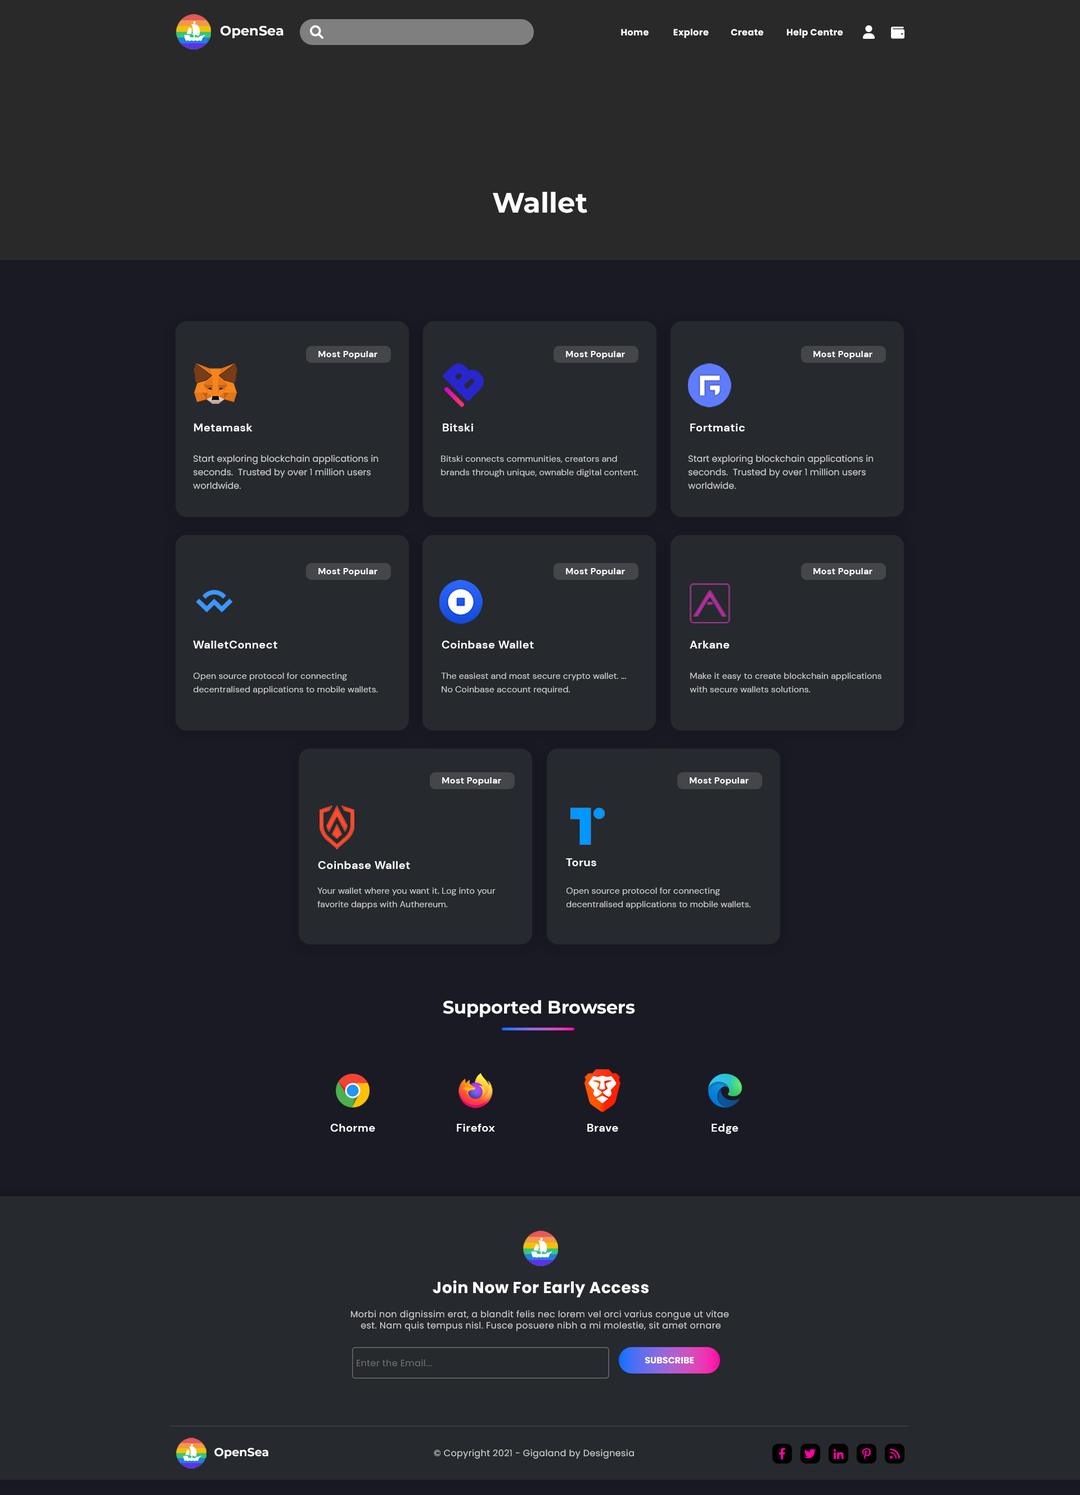
<style>
.page{position:relative;width:1080px;height:1495px;background:#26292d}
.page>*{position:absolute;margin:0}
.t1{font:13.5px "Montserrat-Bold";color:#ffffff}
.t2{font:9px "Poppins-Bold";letter-spacing:0.025em;color:#ffffff}
.t3{font:28.1px "Montserrat-Bold";color:#fefefe}
.t4{font:9px "DMSans-Bold";letter-spacing:0.025em;color:#ffffff}
.t5{font:11.2px "DMSans-Bold";letter-spacing:0.025em;color:#ffffff}
.t6{font:9px/13.5px "Poppins-Regular";color:#cccccc}
.t7{font:9px/13.5px "DMSans-Regular";color:#cccccc}
.t8{font:18px "Montserrat-Bold";color:#ffffff}
.t9{font:15.8px "Poppins-Bold";letter-spacing:0.025em;color:#ffffff}
.t10{font:9px "Poppins-Regular";letter-spacing:0.025em;color:#cccccc}
.t11{font:9px "Poppins-Regular";letter-spacing:0.025em;color:#6d6d6d}
.t12{font:9px "Poppins-Bold";color:#ffffff}
.t13{font:11.6px "Montserrat-Bold";color:#ffffff}
</style>
<div class="page">
<p class="t1" style="left:220px;top:26px;width:64px;height:12px">OpenSea</p>
<p class="t2" style="left:621px;top:29px;width:28px;height:7px">Home</p>
<p class="t2" style="left:673px;top:29px;width:36px;height:9px">Explore</p>
<p class="t2" style="left:731px;top:29px;width:32px;height:7px">Create</p>
<p class="t2" style="left:787px;top:29px;width:56px;height:9px">Help Centre</p>
<p class="t3" style="left:493px;top:192px;width:94px;height:21px">Wallet</p>
<p class="t4" style="left:318px;top:351px;width:59px;height:8px">Most Popular</p>
<p class="t4" style="left:566px;top:351px;width:59px;height:8px">Most Popular</p>
<p class="t4" style="left:813px;top:351px;width:59px;height:8px">Most Popular</p>
<p class="t5" style="left:194px;top:424px;width:59px;height:7px">Metamask</p>
<p class="t5" style="left:443px;top:424px;width:30px;height:7px">Bitski</p>
<p class="t5" style="left:690px;top:424px;width:55px;height:7px">Fortmatic</p>
<p class="t6" style="left:193px;top:454px;width:186px;height:35px">Start exploring blockchain applications in seconds.  Trusted by over 1 million users worldwide.</p>
<p class="t7" style="left:441px;top:456px;width:197px;height:21px">Bitski connects communities, creators and brands through unique, ownable digital content.</p>
<p class="t6" style="left:688px;top:454px;width:186px;height:35px">Start exploring blockchain applications in seconds.  Trusted by over 1 million users worldwide.</p>
<p class="t4" style="left:318px;top:568px;width:59px;height:8px">Most Popular</p>
<p class="t4" style="left:566px;top:568px;width:59px;height:8px">Most Popular</p>
<p class="t4" style="left:813px;top:568px;width:59px;height:8px">Most Popular</p>
<p class="t5" style="left:193px;top:641px;width:84px;height:8px">WalletConnect</p>
<p class="t5" style="left:442px;top:641px;width:92px;height:8px">Coinbase Wallet</p>
<p class="t5" style="left:690px;top:641px;width:40px;height:8px">Arkane</p>
<p class="t7" style="left:193px;top:673px;width:185px;height:21px">Open source protocol for connecting decentralised applications to mobile wallets.</p>
<p class="t7" style="left:441px;top:673px;width:185px;height:21px">The easiest and most secure crypto wallet. ... No Coinbase account required.</p>
<p class="t7" style="left:690px;top:673px;width:191px;height:19px">Make it easy to create blockchain applications with secure wallets solutions.</p>
<p class="t4" style="left:442px;top:777px;width:59px;height:8px">Most Popular</p>
<p class="t4" style="left:690px;top:777px;width:59px;height:8px">Most Popular</p>
<p class="t5" style="left:318px;top:861px;width:92px;height:8px">Coinbase Wallet</p>
<p class="t5" style="left:566px;top:858px;width:30px;height:8px">Torus</p>
<p class="t7" style="left:317px;top:888px;width:179px;height:21px">Your wallet where you want it. Log into your favorite dapps with Authereum.</p>
<p class="t7" style="left:566px;top:888px;width:185px;height:21px">Open source protocol for connecting decentralised applications to mobile wallets.</p>
<p class="t8" style="left:443px;top:1000px;width:192px;height:18px">Supported Browsers</p>
<p class="t5" style="left:330px;top:1124px;width:45px;height:8px">Chorme</p>
<p class="t5" style="left:457px;top:1124px;width:38px;height:8px">Firefox</p>
<p class="t5" style="left:587px;top:1124px;width:31px;height:8px">Brave</p>
<p class="t5" style="left:712px;top:1124px;width:27px;height:10px">Edge</p>
<p class="t9" style="left:433px;top:1280px;width:216px;height:18px">Join Now For Early Access</p>
<p class="t10" style="left:350px;top:1310px;width:379px;height:21px;text-align:center">Morbi non dignissim erat, a blandit felis nec lorem vel orci varius congue ut vitae <br>est. Nam quis tempus nisl. Fusce posuere nibh a mi molestie, sit amet ornare</p>
<p class="t11" style="left:357px;top:1359px;width:75px;height:8px">Enter the Email...</p>
<p class="t12" style="left:645px;top:1357px;width:49px;height:7px">SUBSCRIBE</p>
<p class="t13" style="left:214px;top:1448px;width:54px;height:11px">OpenSea</p>
<p class="t10" style="left:434px;top:1449px;width:200px;height:10px">© Copyright 2021 - Gigaland by Designesia</p>
</div>
